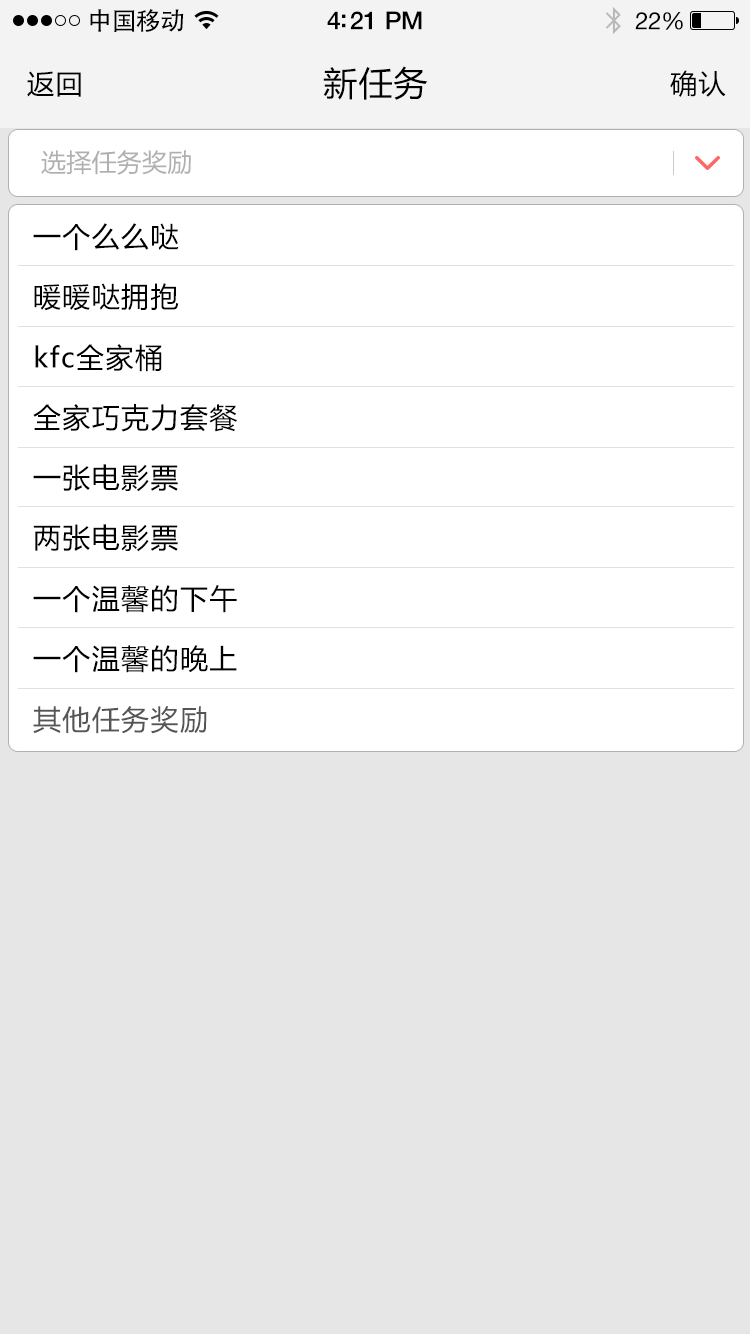
<style>
.page{position:relative;width:750px;height:1334px;background:#e6e6e6}
.page>*{position:absolute;margin:0}
.t1{font:25px "AdobeHeitiStd-Regular";letter-spacing:-0.025em;color:#000000}
.t2{font:25px "HelveticaNeue-Medium";letter-spacing:-0.02em;color:#000000}
.t3{font:24px "HelveticaNeue";letter-spacing:-0.02em;color:#000000}
.t4{font:27px "MicrosoftYaHei";letter-spacing:0.05em;color:#000000}
.t5{font:34px "MicrosoftYaHei";letter-spacing:0.03em;color:#000000}
.t6{font:25px "MicrosoftYaHei";letter-spacing:0.01em;color:#b0b0b0}
.t7{font:28px "MicrosoftYaHei";letter-spacing:0.05em;color:#000000}
.t8{font:28px "MicrosoftYaHei";letter-spacing:0.05em;color:#555555}
</style>
<div class="page">
<p class="t1" style="left:90px;top:9px;width:94px;height:23px">中国移动</p>
<p class="t2" style="left:327px;top:11px;width:95px;height:19px">4:21 PM</p>
<p class="t3" style="left:635px;top:12px;width:48px;height:18px">22%</p>
<p class="t4" style="left:27px;top:71px;width:54px;height:26px">返回</p>
<p class="t5" style="left:323px;top:66px;width:105px;height:34px">新任务</p>
<p class="t4" style="left:670px;top:70px;width:56px;height:27px">确认</p>
<p class="t6" style="left:41px;top:150px;width:150px;height:25px">选择任务奖励</p>
<p class="t7" style="left:33px;top:223px;width:146px;height:28px">一个么么哒</p>
<p class="t7" style="left:34px;top:283px;width:145px;height:28px">暖暖哒拥抱</p>
<p class="t7" style="left:35px;top:344px;width:127px;height:28px">kfc全家桶</p>
<p class="t7" style="left:33px;top:404px;width:204px;height:28px">全家巧克力套餐</p>
<p class="t7" style="left:33px;top:464px;width:145px;height:28px">一张电影票</p>
<p class="t7" style="left:33px;top:524px;width:145px;height:28px">两张电影票</p>
<p class="t7" style="left:33px;top:585px;width:204px;height:28px">一个温馨的下午</p>
<p class="t7" style="left:33px;top:645px;width:204px;height:28px">一个温馨的晚上</p>
<p class="t8" style="left:33px;top:706px;width:174px;height:28px">其他任务奖励</p>
</div>
